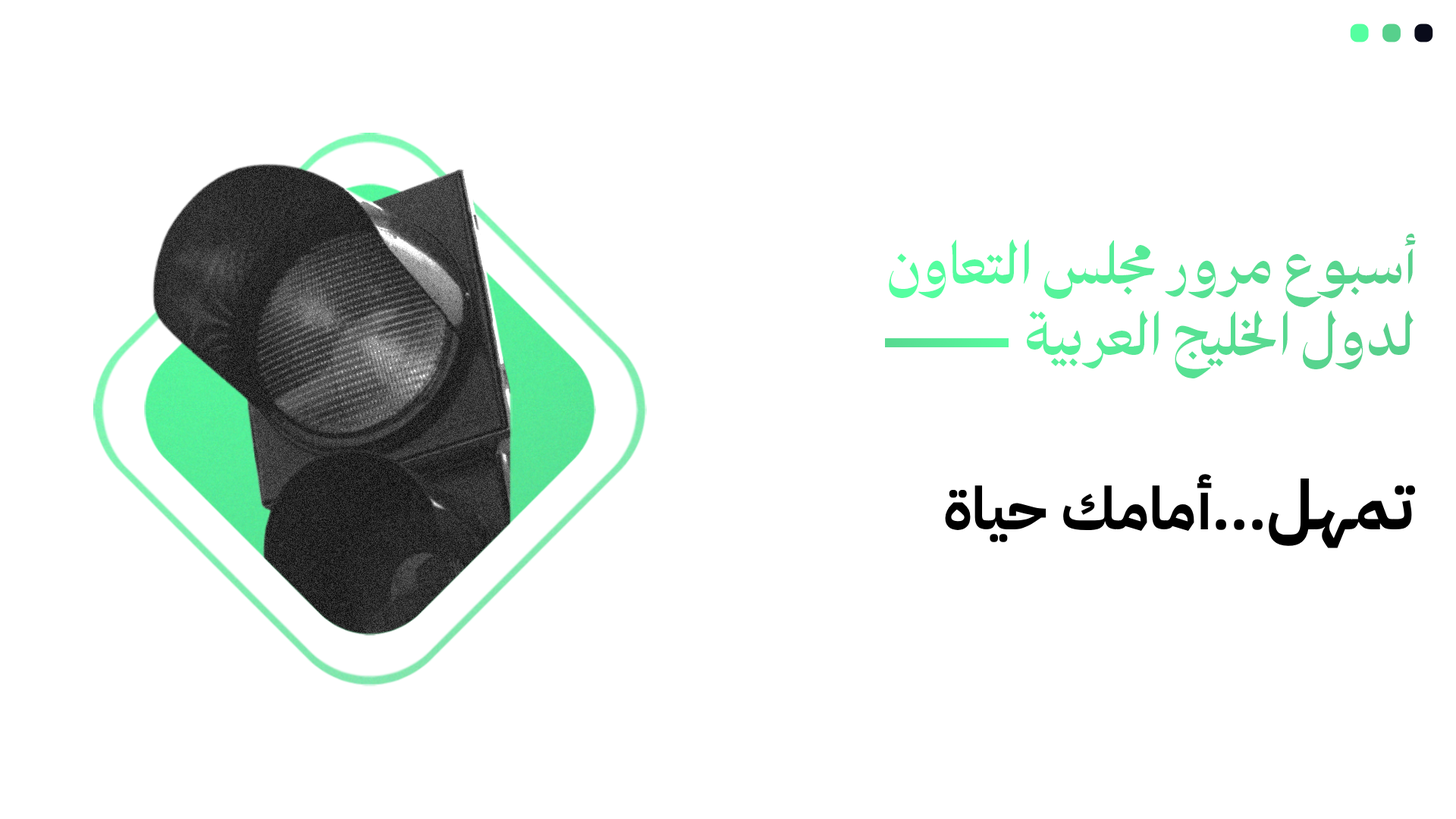
<style>
.page{position:relative;width:1456px;height:819px;background:#ffffff}
.page>*{position:absolute;margin:0}
.t1{font:59.4px "TheYearofTheCamel-ExtraBold";color:#56e294}
.t2{font:59.1px "IBMPlexSansArabic-Bold";color:#000000}
.t3{font:68.7px "IBMPlexSansArabic-Bold";color:#000000}
</style>
<div class="page">
<p class="t1" style="left:889px;top:234px;width:527px;height:144px;text-align:right">أسبوع مرور مجلس التعاون<br> لدول الخليج العربية</p>
<p class="t2" style="left:945px;top:474px;width:471px;height:74px"><span class="t3">تمهل</span>...أمامك حياة</p>
</div>
